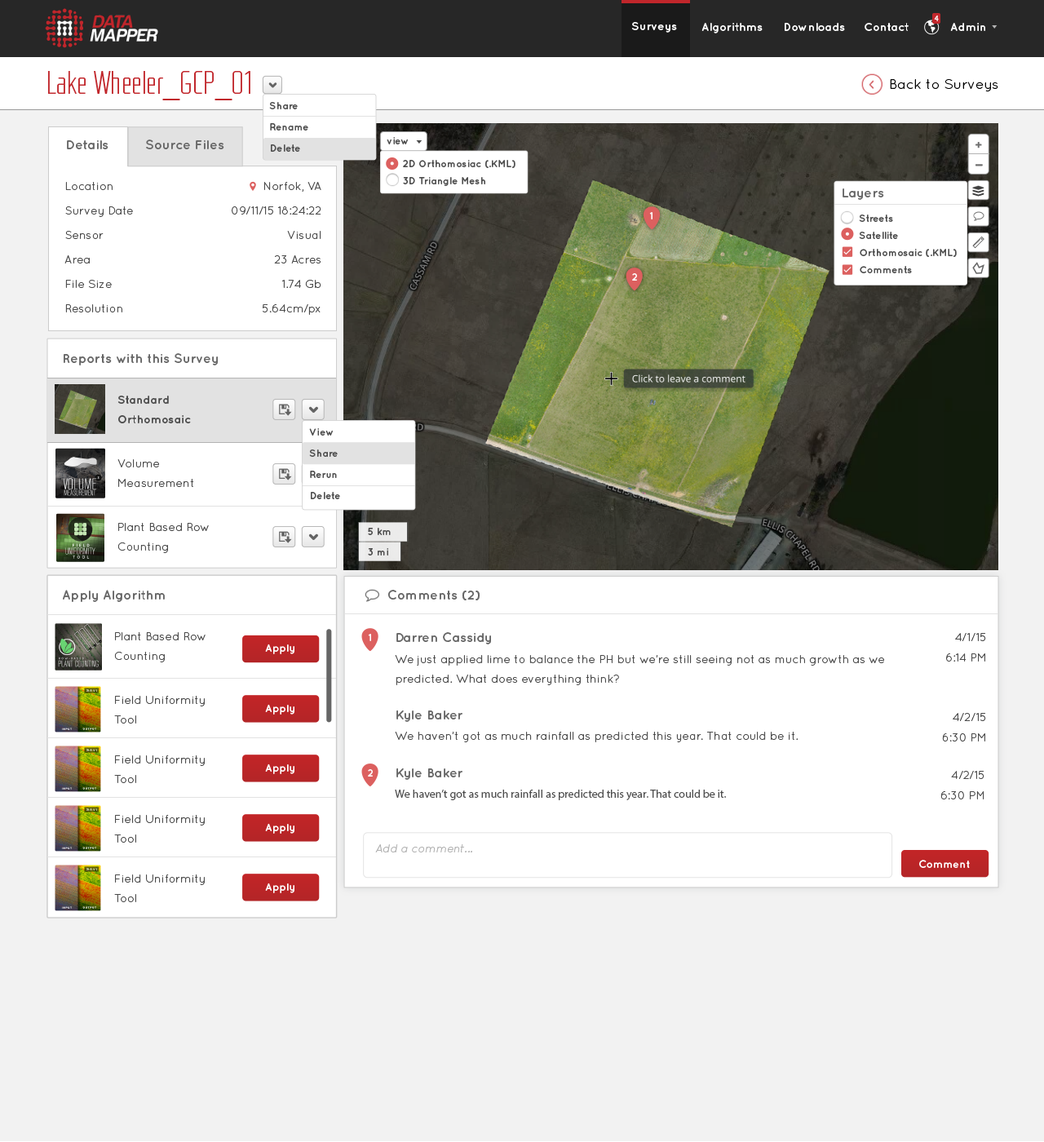
<style>
.page{position:relative;width:1044px;height:1142px;background:#ffffff}
.page>*{position:absolute;margin:0}
.t1{font:7.3px "Helvetica";color:#ffffff}
.t2{font:11.4px "Quicksand-Bold";color:#ffffff}
.t3{font:32.6px "RBNo2-Light-Alternative";color:#c1272c}
.t4{font:13.9px "QuicksandBook-Regular";color:#000000}
.t5{font:9.8px/21.2px "Quicksand-Bold";color:#4d4d4d}
.t6{font:9.8px "Quicksand-Bold";color:#4d4d4d}
.t7{font:13.1px "Quicksand-Bold";color:#666666}
.t8{font:9.8px/17.1px "Quicksand-Bold";color:#4d4d4d}
.t9{font:11.4px/24.5px "QuicksandBook-Regular";color:#4d4d4d}
.t10{font:9.8px "Quicksand-Bold";color:#ffffff}
.t11{font:11.4px/19.6px "Quicksand-Bold";color:#4d4d4d}
.t12{font:11.4px/19.6px "QuicksandBook-Regular";color:#4d4d4d}
.t13{font:11.4px/20.4px "QuicksandBook-Regular";color:#4d4d4d}
.t14{font:10.6px "Quicksand-Bold";color:#ffffff}
.t15{font:11.4px "QuicksandBook-Regular";color:#4d4d4d}
.t16{font:11.4px "MyriadPro-Regular";color:#4d4d4d}
.t17{font:11.4px "Quicksand-Italic";color:#b3b3b3}
</style>
<div class="page">
<p class="t1" style="left:934px;top:15px;width:5px;height:6px">4</p>
<p class="t2" style="left:631px;top:22px;width:46px;height:11px">Surveys</p>
<p class="t2" style="left:702px;top:23px;width:61px;height:10px">Algorithms</p>
<p class="t2" style="left:785px;top:23px;width:60px;height:8px">Downloads</p>
<p class="t2" style="left:865px;top:23px;width:44px;height:8px">Contact</p>
<p class="t2" style="left:950px;top:23px;width:35px;height:8px">Admin</p>
<p class="t3" style="left:48px;top:71px;width:202px;height:29px">Lake Wheeler_GCP_01</p>
<p class="t4" style="left:890px;top:79px;width:108px;height:13px">Back to Surveys</p>
<p class="t5" style="left:269px;top:102px;width:39px;height:50px">Share<br>Rename<br>Delete</p>
<p class="t6" style="left:387px;top:137px;width:21px;height:7px">view</p>
<p class="t7" style="left:67px;top:140px;width:41px;height:9px">Details</p>
<p class="t7" style="left:146px;top:139px;width:78px;height:10px">Source Files</p>
<p class="t8" style="left:403px;top:160px;width:113px;height:26px">2D Orthomosiac (.KML)<br>3D Triangle Mesh</p>
<p class="t9" style="left:64px;top:182px;width:69px;height:130px">Location<br>Survey Date<br>Sensor<br>Area<br>File Size<br>Resolution</p>
<p class="t9" style="left:232px;top:182px;width:89px;height:133px;text-align:right">Norfok, VA<br>09/11/15 18:24:22<br>Visual<br>23 Acres<br>1.74 Gb<br>5.64cm/px</p>
<p class="t7" style="left:843px;top:188px;width:41px;height:12px">Layers</p>
<p class="t10" style="left:649px;top:212px;width:4px;height:7px">1</p>
<p class="t8" style="left:859px;top:215px;width:98px;height:58px">Streets<br>Satellite<br>Orthomosaic (.KML)<br>Comments</p>
<p class="t10" style="left:632px;top:273px;width:5px;height:8px">2</p>
<p class="t7" style="left:64px;top:353px;width:154px;height:12px">Reports with this Survey</p>
<p class="t11" style="left:117px;top:396px;width:74px;height:27px">Standard <br>Orthomosaic</p>
<p class="t5" style="left:309px;top:428px;width:31px;height:71px">View<br>Share<br>Rerun<br>Delete</p>
<p class="t12" style="left:117px;top:459px;width:76px;height:28px">Volume <br>Measurement</p>
<p class="t12" style="left:117px;top:523px;width:92px;height:30px">Plant Based Row <br>Counting</p>
<p class="t6" style="left:368px;top:528px;width:23px;height:7px">5 km</p>
<p class="t6" style="left:368px;top:548px;width:20px;height:8px">3 mi</p>
<p class="t7" style="left:63px;top:590px;width:102px;height:12px">Apply Algorithm</p>
<p class="t7" style="left:388px;top:590px;width:92px;height:10px">Comments (2)</p>
<p class="t12" style="left:114px;top:632px;width:92px;height:30px">Plant Based Row <br>Counting</p>
<p class="t10" style="left:368px;top:634px;width:3px;height:7px">1</p>
<p class="t7" style="left:396px;top:632px;width:95px;height:12px">Darren Cassidy</p>
<p class="t13" style="left:946px;top:633px;width:40px;height:29px;text-align:right">4/1/15<br>6:14 PM</p>
<p class="t14" style="left:265px;top:644px;width:29px;height:10px">Apply</p>
<p class="t12" style="left:395px;top:655px;width:489px;height:30px">We just applied lime to balance the PH but we’re still seeing not as much growth as we <br>predicted. What does everything think?</p>
<p class="t12" style="left:114px;top:696px;width:91px;height:28px">Field Uniformity <br>Tool</p>
<p class="t14" style="left:265px;top:704px;width:29px;height:11px">Apply</p>
<p class="t7" style="left:396px;top:710px;width:67px;height:12px">Kyle Baker</p>
<p class="t13" style="left:942px;top:713px;width:44px;height:29px;text-align:right">4/2/15<br>6:30 PM</p>
<p class="t15" style="left:395px;top:732px;width:404px;height:10px">We haven’t got as much rainfall as predicted this year. That could be it.</p>
<p class="t12" style="left:114px;top:755px;width:91px;height:28px">Field Uniformity <br>Tool</p>
<p class="t14" style="left:265px;top:764px;width:29px;height:10px">Apply</p>
<p class="t10" style="left:368px;top:769px;width:5px;height:8px">2</p>
<p class="t7" style="left:396px;top:768px;width:67px;height:12px">Kyle Baker</p>
<p class="t13" style="left:941px;top:771px;width:44px;height:28px;text-align:right">4/2/15<br>6:30 PM</p>
<p class="t16" style="left:395px;top:790px;width:331px;height:10px">We haven’t got as much rainfall as predicted this year. That could be it.</p>
<p class="t12" style="left:114px;top:815px;width:91px;height:28px">Field Uniformity <br>Tool</p>
<p class="t14" style="left:265px;top:823px;width:29px;height:11px">Apply</p>
<p class="t17" style="left:375px;top:844px;width:97px;height:8px">Add a comment...</p>
<p class="t14" style="left:919px;top:860px;width:51px;height:8px">Comment</p>
<p class="t12" style="left:114px;top:874px;width:91px;height:28px">Field Uniformity <br>Tool</p>
<p class="t14" style="left:265px;top:883px;width:29px;height:10px">Apply</p>
</div>
